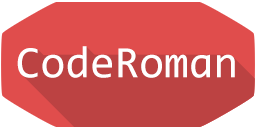
<style>
.page{position:relative;width:256px;height:128px;background:#e04d4c}
.page>*{position:absolute;margin:0}
.t1{font:45px "CodeNewRoman";color:#ffffff}
</style>
<div class="page">
<p class="t1" style="left:17px;top:46px;width:218px;height:32px">CodeRoman</p>
</div>
